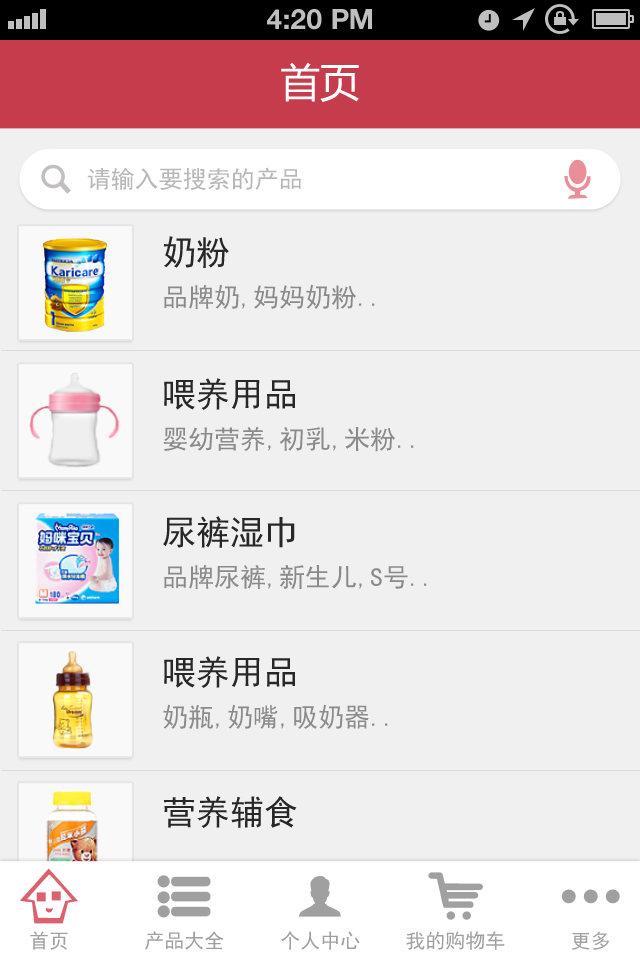
<style>
.page{position:relative;width:640px;height:960px;background:#f0f0f0}
.page>*{position:absolute;margin:0}
.t1{font:28px "HelveticaNeue-Bold";color:#bfbfbf;text-transform:uppercase}
.t2{font:40px "MicrosoftYaHei";color:#ffffff;text-transform:uppercase}
.t3{font:24px "SimHei";color:#b8b8b8}
.t4{font:26px/14px "SimHei";color:#8a8a8a}
.t5{font:34px/14px "SimHei";color:#272727}
.t6{font:26px/14px "SimHei";color:#8b8b8b}
.t7{font:34px "SimHei";color:#272727}
.t8{font:20px "SimHei";color:#a0a0a0}
</style>
<div class="page">
<p class="t1" style="left:267px;top:9px;width:105px;height:21px">4:20 PM</p>
<p class="t2" style="left:281px;top:62px;width:78px;height:40px">首页</p>
<p class="t3" style="left:87px;top:167px;width:214px;height:23px">请输入要搜索的产品</p>
<p class="t4" style="left:164px;top:236px;width:211px;height:74px"><span class="t5">奶粉<br><br><br></span>品牌奶,妈妈奶粉..</p>
<p class="t4" style="left:163px;top:378px;width:251px;height:74px"><span class="t5">喂养用品<br><br><br></span>婴幼营养,初乳,米粉..</p>
<p class="t4" style="left:163px;top:516px;width:264px;height:73px"><span class="t5">尿裤湿巾<br><br><br></span>品牌尿裤,新生儿,S号..</p>
<p class="t6" style="left:163px;top:656px;width:225px;height:73px"><span class="t5">喂养用品<br><br><br></span>奶瓶,奶嘴,吸奶器..</p>
<p class="t7" style="left:164px;top:796px;width:133px;height:32px">营养辅食</p>
<p class="t8" style="left:30px;top:931px;width:38px;height:19px">首页</p>
<p class="t8" style="left:145px;top:931px;width:79px;height:19px">产品大全</p>
<p class="t8" style="left:281px;top:931px;width:79px;height:19px">个人中心</p>
<p class="t8" style="left:406px;top:931px;width:99px;height:19px">我的购物车</p>
<p class="t8" style="left:572px;top:931px;width:38px;height:19px">更多</p>
</div>
